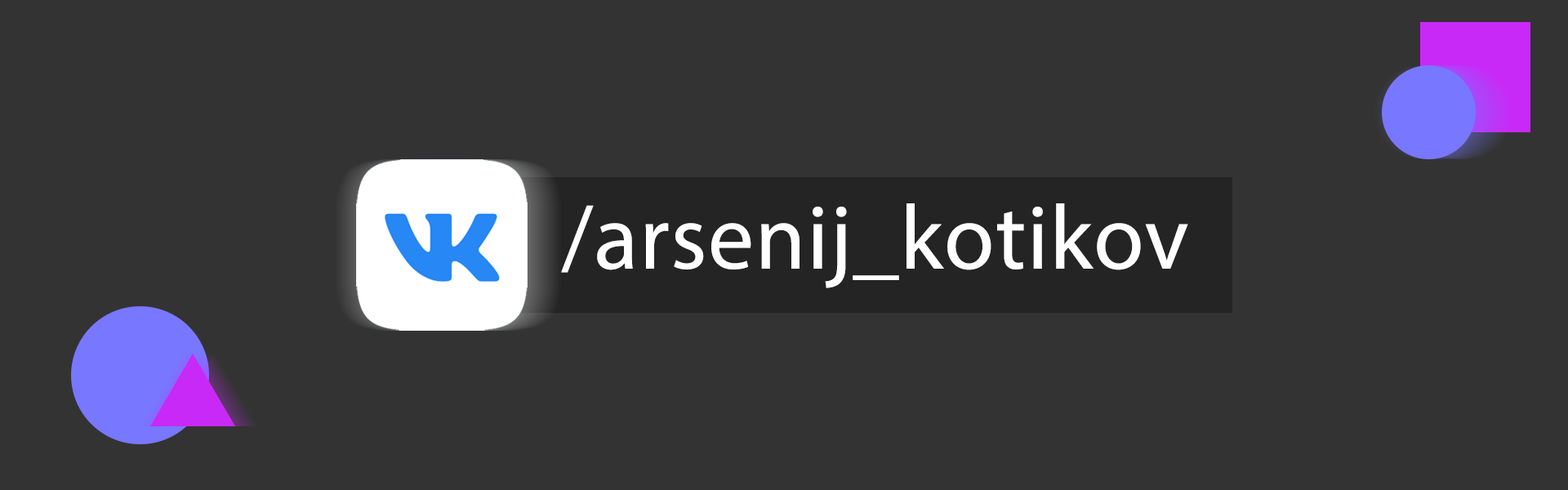
<style>
.page{position:relative;width:1568px;height:490px;background:#333333}
.page>*{position:absolute;margin:0}
.t1{font:91.7px "MyriadPro-Regular";letter-spacing:0.012em;color:#ffffff}
</style>
<div class="page">
<p class="t1" style="left:561px;top:203px;width:627px;height:85px">/arsenij_kotikov</p>
</div>
